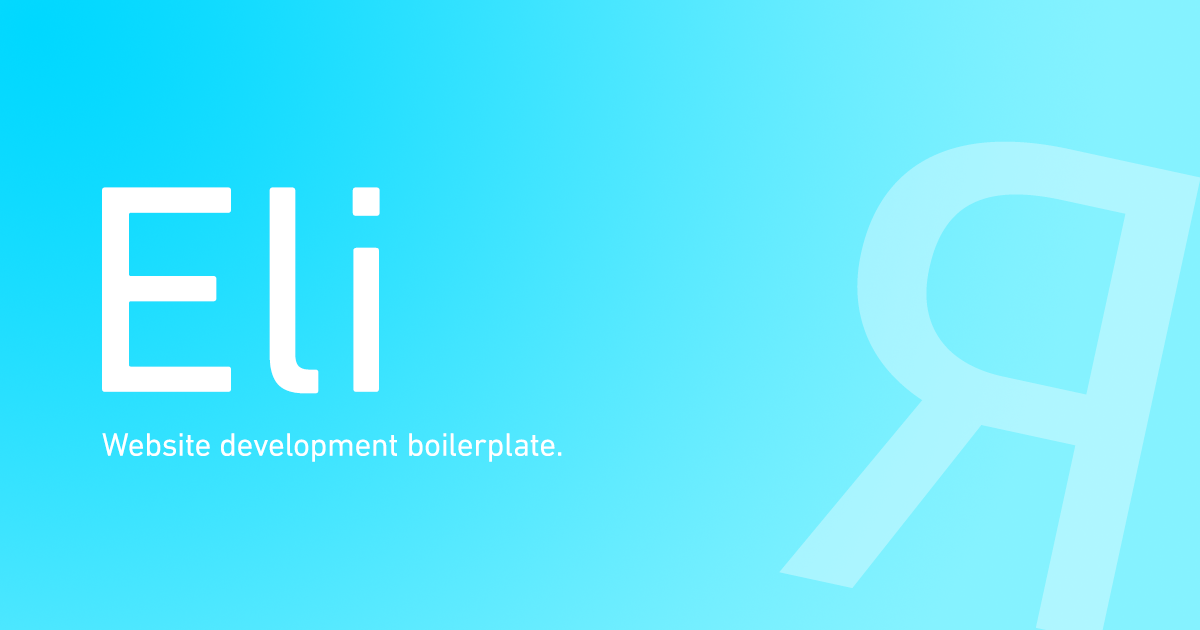
<style>
.page{position:relative;width:1200px;height:630px}
.page>*{position:absolute;margin:0}
.t1{font:300px "DINNextW01-Regular";color:#ffffff}
.t2{font:33px "DINNextW01-Regular";color:#ffffff}
</style>
<div class="page">
<p class="t1" style="left:102px;top:187px;width:278px;height:207px">Eli</p>
<p class="t2" style="left:102px;top:433px;width:460px;height:29px">Website development boilerplate.</p>
</div>
